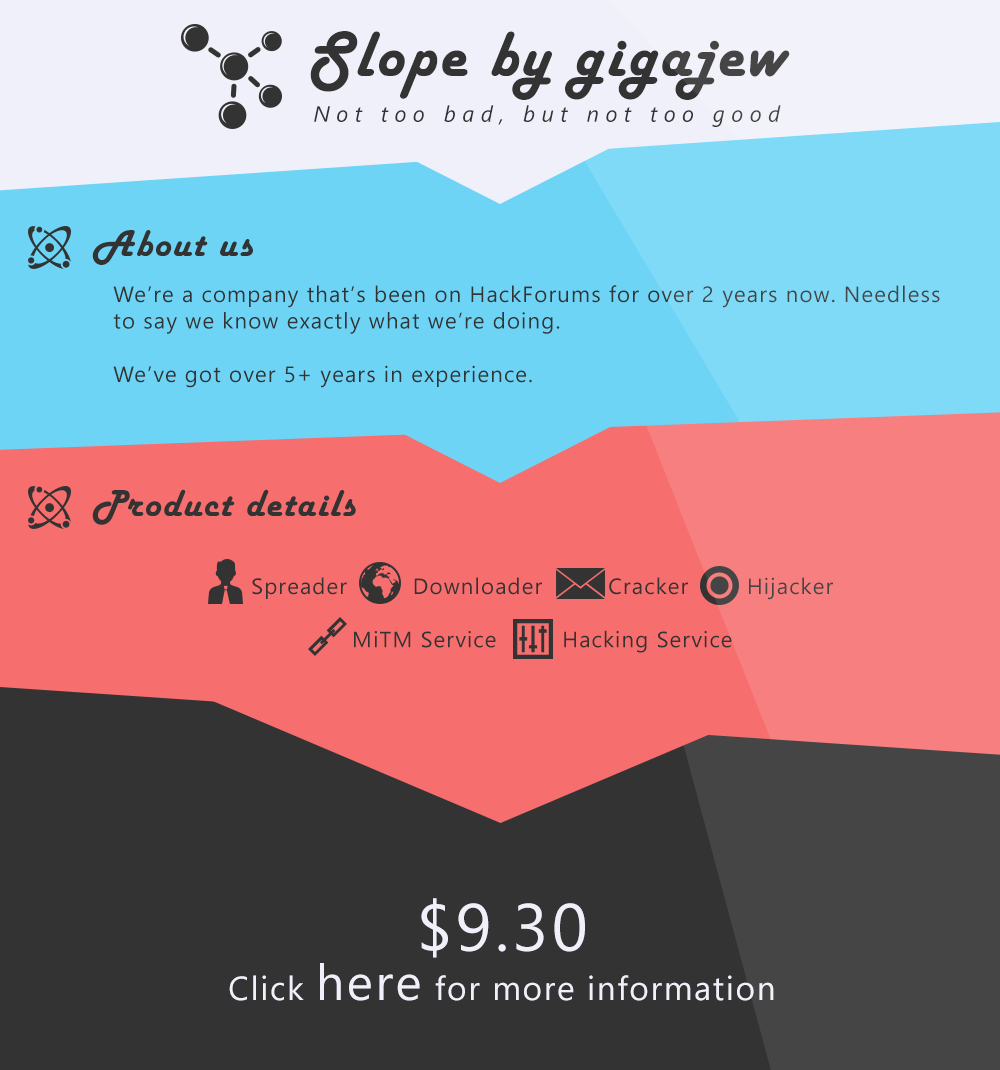
<style>
.page{position:relative;width:1000px;height:1070px;background:#333333}
.page>*{position:absolute;margin:0}
.t1{font:66.7px "HarlowSolid";letter-spacing:0.05em;color:#333333}
.t2{font:22.2px "SegoeUI-Italic";letter-spacing:0.29em;color:#333333}
.t3{font:38.9px "HarlowSolid";letter-spacing:0.05em;color:#333333}
.t4{font:22.2px "SegoeUI";letter-spacing:0.05em;color:#333333}
.t5{font:66.7px "SegoeUI";letter-spacing:0.05em;color:#f0f0fa}
.t6{font:33.3px "SegoeUI";letter-spacing:0.05em;color:#f0f0fa}
.t7{font:50px "SegoeUI";letter-spacing:0.05em;color:#f0f0fa}
</style>
<div class="page">
<p class="t1" style="left:310px;top:31px;width:480px;height:69px">Slope by gigajew</p>
<p class="t2" style="left:314px;top:105px;width:467px;height:22px">Not too bad, but not too good</p>
<p class="t3" style="left:92px;top:230px;width:161px;height:35px">About us</p>
<p class="t4" style="left:113px;top:285px;width:827px;height:103px">We’re a company that’s been on HackForums for over 2 years now. Needless<br>to say we know exactly what we’re doing.<br><br>We’ve got over 5+ years in experience.</p>
<p class="t3" style="left:92px;top:489px;width:264px;height:36px">Product details</p>
<p class="t4" style="left:252px;top:577px;width:581px;height:76px;text-align:center">Spreader         Downloader         Cracker        Hijacker<br><br>MiTM Service         Hacking Service</p>
<p class="t5" style="left:421px;top:898px;width:164px;height:60px">$9.30</p>
<p class="t6" style="left:229px;top:963px;width:545px;height:38px">Click <span class="t7">here</span> for more information</p>
</div>
